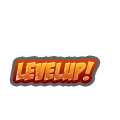
<style>
.page{position:relative;width:120px;height:120px;background:#ffffff}
.page>*{position:absolute;margin:0}
.t1{font:24px "BadaBoomBB";letter-spacing:0.01em;font-weight:bold}
</style>
<div class="page">
<p class="t1" style="left:15px;top:61px;width:80px;height:20px">Levelup!</p>
</div>
